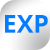
<style>
.page{position:relative;width:50px;height:50px}
.page>*{position:absolute;margin:0}
.t1{font:25px "OpenSans-Bold";color:#007eff}
</style>
<div class="page">
<p class="t1" style="left:5px;top:15px;width:43px;height:18px">EXP</p>
</div>
